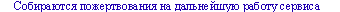
<style>
.page{position:relative;width:340px;height:12px;background:#ffffff}
.page>*{position:absolute;margin:0}
.t1{font:12px "TimesNewRomanPSMT";color:#2100b0}
</style>
<div class="page">
<p class="t1" style="left:14px;top:1px;width:306px;height:12px">Собираются пожертвования на дальнейшую работу сервиса</p>
</div>
